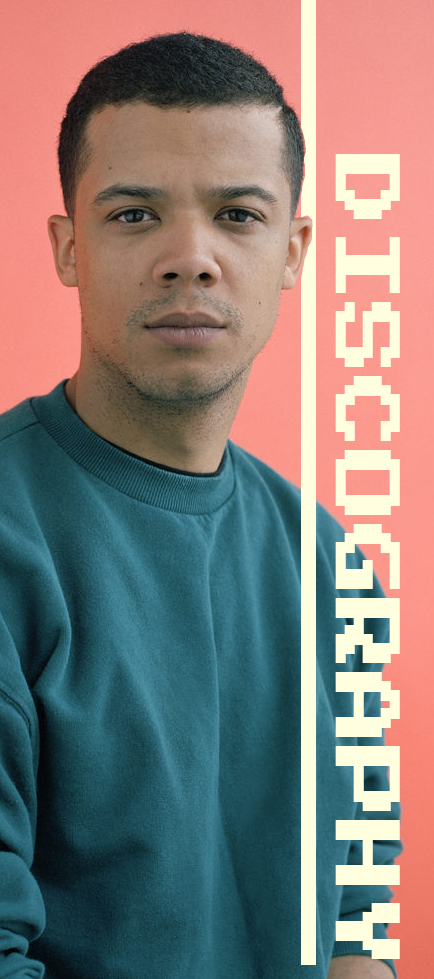
<style>
.page{position:relative;width:434px;height:979px}
.page>*{position:absolute;margin:0}
.t1{font:72px "PressStart2P-Regular";color:#ffffe0;font-weight:bold}
</style>
<div class="page">
<p class="t1" style="left:335px;top:154px;width:65px;height:805px;rotate:90deg">DISCOGRAPHY</p>
</div>
